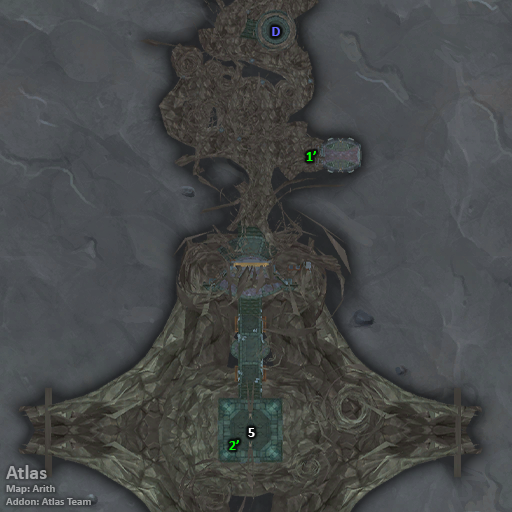
<style>
.page{position:relative;width:512px;height:512px}
.page>*{position:absolute;margin:0}
.t1{font:14px "Calibri-Bold";color:#6666ff}
.t2{font:14px "Calibri-Bold";color:#00ff00}
.t3{font:14px "Calibri-Bold";color:#ffffff}
.t4{font:11px "Calibri-Bold";color:#a4a6a7}
.t5{font:20px "Calibri-Bold";color:#a4a6a7}
</style>
<div class="page">
<p class="t1" style="left:272px;top:27px;width:8px;height:9px">D</p>
<p class="t2" style="left:306px;top:151px;width:10px;height:10px">1’</p>
<p class="t3" style="left:248px;top:428px;width:7px;height:9px">5</p>
<p class="t2" style="left:229px;top:440px;width:10px;height:10px">2’</p>
<p class="t4" style="left:6px;top:465px;width:85px;height:40px"><span class="t5">Atlas<br></span>Map: Arith<br>Addon: Atlas Team</p>
</div>
